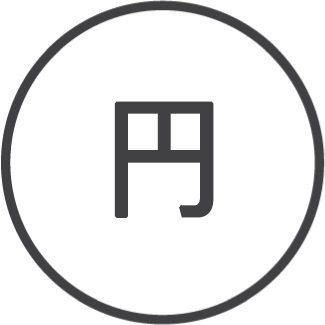
<style>
.page{position:relative;width:325px;height:325px;background:#ffffff}
.page>*{position:absolute;margin:0}
.t1{font:130px "PingFangSC-Regular";color:#414143;font-weight:bold}
</style>
<div class="page">
<p class="t1" style="left:114px;top:101px;width:100px;height:117px">円</p>
</div>
